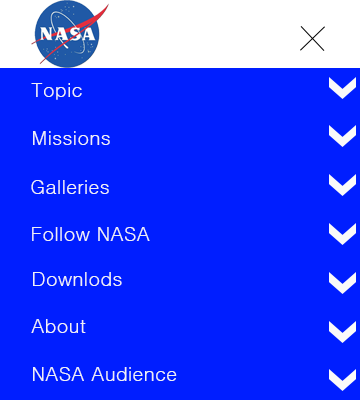
<style>
.page{position:relative;width:360px;height:400px;background:#001eff}
.page>*{position:absolute;margin:0}
.t1{font:20px "Dotum";color:#eff0f5}
</style>
<div class="page">
<p class="t1" style="left:31px;top:83px;width:51px;height:17px">Topic</p>
<p class="t1" style="left:33px;top:131px;width:77px;height:14px">Missions</p>
<p class="t1" style="left:31px;top:180px;width:78px;height:14px">Galleries</p>
<p class="t1" style="left:32px;top:227px;width:118px;height:14px">Follow NASA</p>
<p class="t1" style="left:33px;top:272px;width:89px;height:14px">Downlods</p>
<p class="t1" style="left:31px;top:319px;width:55px;height:14px">About</p>
<p class="t1" style="left:33px;top:367px;width:144px;height:14px">NASA Audience</p>
</div>
